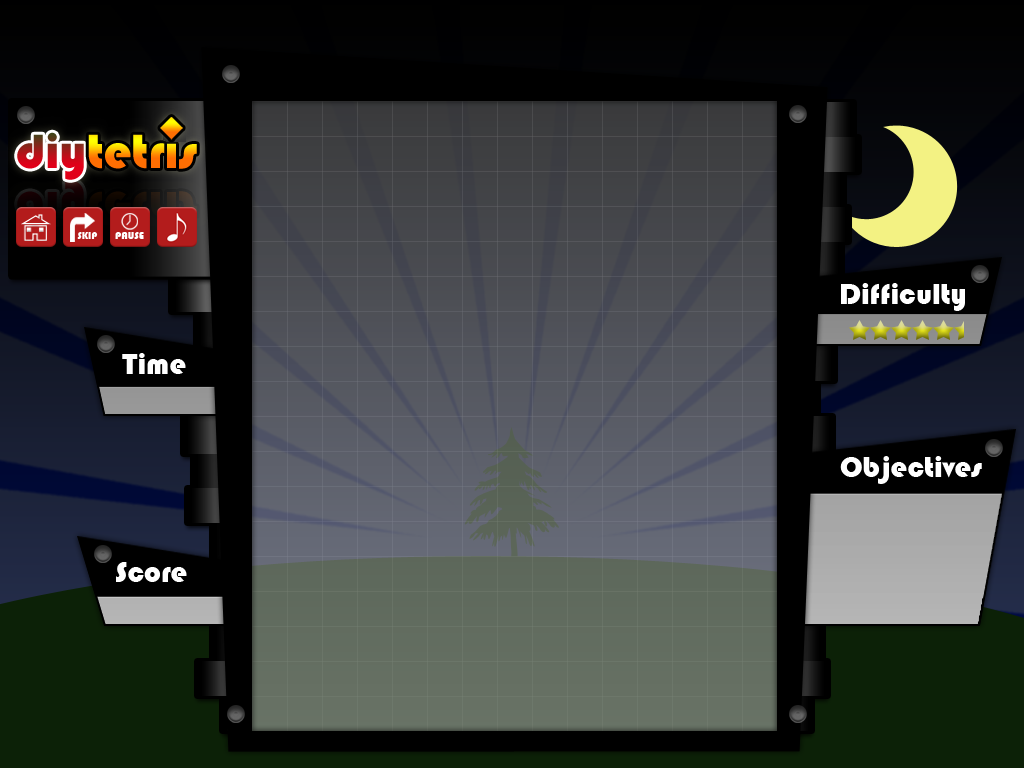
<style>
.page{position:relative;width:1024px;height:768px}
.page>*{position:absolute;margin:0}
.t1{font:30px "Bauhaus93";color:#ffffff}
</style>
<div class="page">
<p class="t1" style="left:841px;top:283px;width:124px;height:28px">Difficulty</p>
<p class="t1" style="left:122px;top:353px;width:64px;height:21px">Time</p>
<p class="t1" style="left:840px;top:456px;width:142px;height:28px">Objectives</p>
<p class="t1" style="left:116px;top:562px;width:71px;height:20px">Score</p>
</div>
